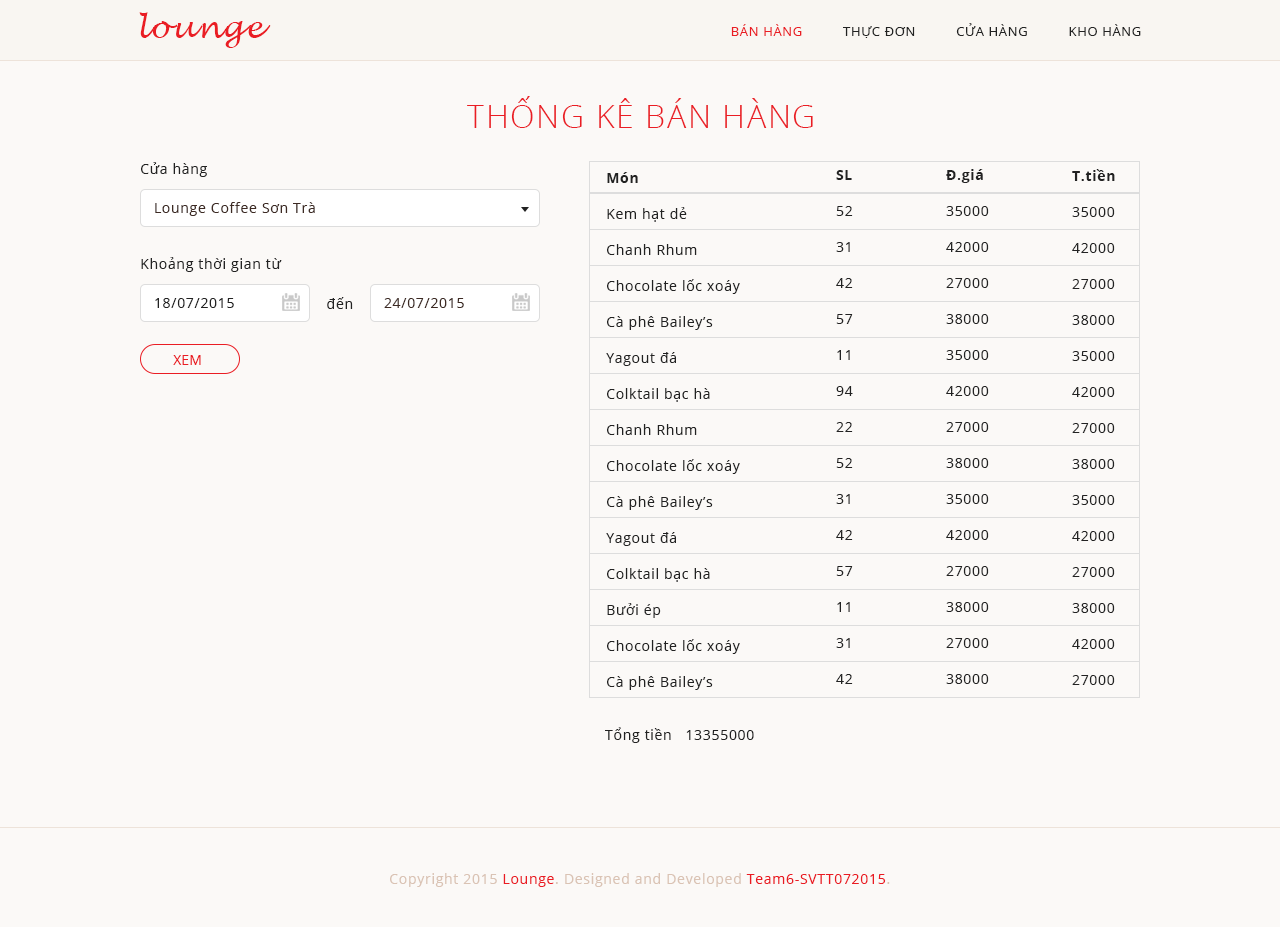
<style>
.page{position:relative;width:1280px;height:927px;background:#fbf9f7}
.page>*{position:absolute;margin:0}
.t1{font:30px "LucidaHandwriting-Italic";letter-spacing:0.05em;color:#ea1d24}
.t2{font:13px "OpenSans";letter-spacing:0.05em;color:#222222}
.t3{font:13px "OpenSans";letter-spacing:0.05em;color:#ea1d24}
.t4{font:32px "OpenSans-Light";letter-spacing:0.05em;color:#ea1d24}
.t5{font:14px "OpenSans";letter-spacing:0.05em;color:#222222}
.t6{font:14px/36px "OpenSans";letter-spacing:0.05em;color:#222222}
.t7{font:14px/36px "OpenSans-Bold";letter-spacing:0.05em;color:#222222}
.t8{font:14px "OpenSans";letter-spacing:0.05em;color:#3d2a23}
.t9{font:14px/23px "OpenSans";letter-spacing:0.05em;color:#222222}
.t10{font:14px "OpenSans";color:#ea1d24}
.t11{font:14px "OpenSans";letter-spacing:0.05em;color:#dac3b4}
.t12{font:14px "OpenSans";letter-spacing:0.05em;color:#ea1b23}
</style>
<div class="page">
<p class="t1" style="left:139px;top:12px;width:132px;height:36px">lounge</p>
<p class="t2" style="left:731px;top:23px;width:410px;height:15px"><span class="t3">BÁN HÀNG  </span>        THỰC ĐƠN          CỬA HÀNG          KHO HÀNG</p>
<p class="t4" style="left:467px;top:96px;width:346px;height:32px">THỐNG KÊ BÁN HÀNG</p>
<p class="t5" style="left:141px;top:162px;width:66px;height:15px">Cửa hàng</p>
<p class="t6" style="left:606px;top:172px;width:134px;height:518px"><span class="t7">Món                   <br></span>Kem hạt dẻ<br>Chanh Rhum<br>Chocolate lốc xoáy<br>Cà phê Bailey’s<br>Yagout đá<br>Colktail bạc hà<br>Chanh Rhum<br>Chocolate lốc xoáy<br>Cà phê Bailey’s<br>Yagout đá<br>Colktail bạc hà<br>Bưởi ép<br>Chocolate lốc xoáy<br>Cà phê Bailey’s</p>
<p class="t6" style="left:836px;top:170px;width:17px;height:514px"><span class="t7">SL<br></span>52<br>31<br>42<br>57<br>11<br>94<br>22<br>52<br>31<br>42<br>57<br>11<br>31<br>42</p>
<p class="t6" style="left:946px;top:169px;width:43px;height:515px"><span class="t7">Đ.giá<br></span>35000<br>42000<br>27000<br>38000<br>35000<br>42000<br>27000<br>38000<br>35000<br>42000<br>27000<br>38000<br>27000<br>38000</p>
<p class="t6" style="left:1072px;top:169px;width:43px;height:516px"><span class="t7">T.tiền<br></span>35000<br>42000<br>27000<br>38000<br>35000<br>42000<br>27000<br>38000<br>35000<br>42000<br>27000<br>38000<br>42000<br>27000</p>
<p class="t8" style="left:155px;top:202px;width:160px;height:14px">Lounge Coffee Sơn Trà</p>
<p class="t5" style="left:141px;top:257px;width:212px;height:52px">Khoảng thời gian từ<br><br>                                           <span class="t9">đ</span>ến</p>
<p class="t5" style="left:155px;top:298px;width:79px;height:10px">18/07/2015</p>
<p class="t8" style="left:384px;top:298px;width:80px;height:10px">24/07/2015</p>
<p class="t10" style="left:173px;top:355px;width:28px;height:10px">XEM</p>
<p class="t5" style="left:605px;top:727px;width:149px;height:16px">Tổng tiền   13355000</p>
<p class="t11" style="left:390px;top:873px;width:500px;height:14px">Copyright 2015 <span class="t12">Lounge</span>. Designed and Developed <span class="t12">Team6-SVTT072015</span>.</p>
</div>
